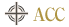
<style>
.page{position:relative;width:69px;height:27px;background:#ffffff}
.page>*{position:absolute;margin:0}
.t1{font:18px "RyuminPro-ExBold";letter-spacing:-0.08em;color:#ae9442;scale:0.9 1}
</style>
<div class="page">
<p class="t1" style="left:33px;top:7px;width:32px;height:15px">ACC</p>
</div>
